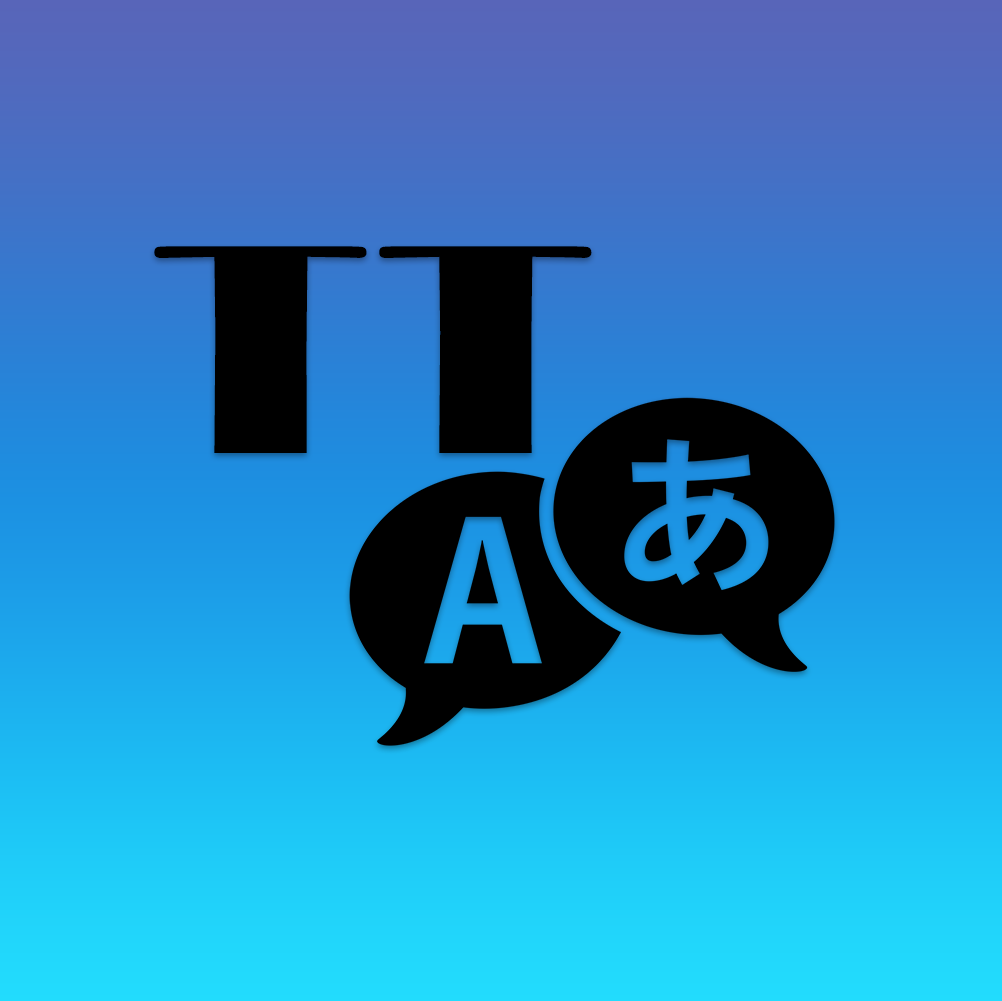
<style>
.page{position:relative;width:1002px;height:1001px}
.page>*{position:absolute;margin:0}
.t1{font:310px "Broadway";color:#000000}
</style>
<div class="page">
<p class="t1" style="left:154px;top:246px;width:438px;height:207px">T T</p>
</div>
